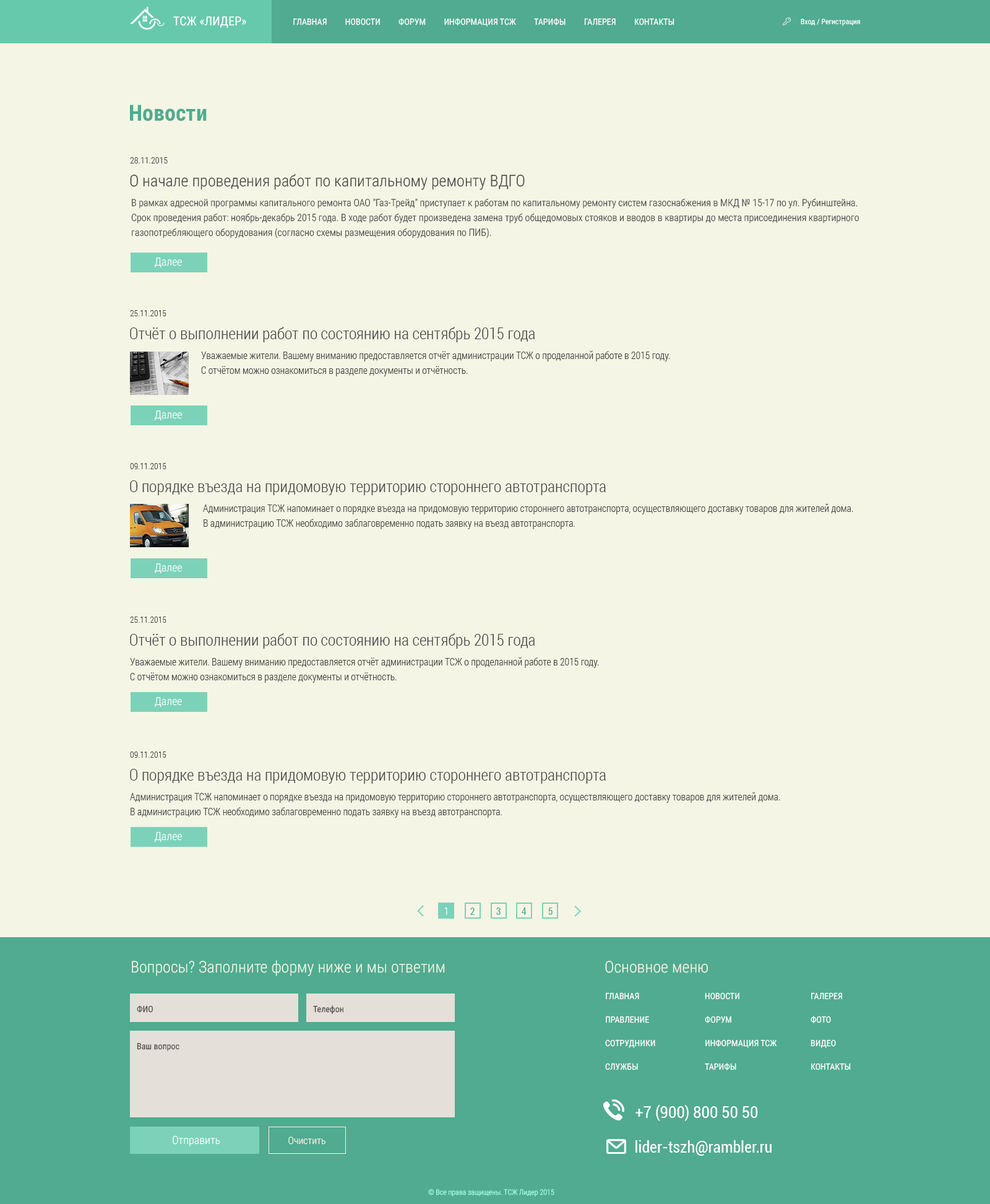
<style>
.page{position:relative;width:990px;height:1204px;background:#f5f5e5}
.page>*{position:absolute;margin:0}
.t1{font:12.4px "RobotoCondensed-Regular";letter-spacing:0.005em;color:#ffffff}
.t2{font:8.7px "RobotoCondensed-Regular";letter-spacing:0.005em;color:#ffffff}
.t3{font:7.4px "RobotoCondensed-Regular";color:#ffffff}
.t4{font:22.3px "RobotoCondensed-Bold";color:#50ab90}
.t5{font:8.7px "RobotoCondensed-Light";color:#454545}
.t6{font:16.1px "RobotoCondensed-Light";color:#454545}
.t7{font:9.9px/14.9px "RobotoCondensed-Light";color:#454545}
.t8{font:11.1px "RobotoCondensed-Light";color:#ffffff}
.t9{font:9.9px "RobotoCondensed-Light";color:#ffffff}
.t10{font:9.9px "RobotoCondensed-Regular";color:#50ab90}
.t11{font:16.1px "RobotoCondensed-Light";color:#f5f5e5}
.t12{font:8.7px/23.5px "RobotoCondensed-Regular";color:#ffffff}
.t13{font:8.7px "RobotoCondensed-Regular";color:#4c4a46}
.t14{font:16.1px "Roboto-Condensed";color:#ffffff}
.t15{font:9.9px "RobotoCondensed-Light";color:#f5f5e5}
.t16{font:7.4px "RobotoCondensed-Light";color:#a6fde3}
</style>
<div class="page">
<p class="t1" style="left:173px;top:16px;width:73px;height:12px">ТСЖ «ЛИДЕР»</p>
<p class="t2" style="left:293px;top:18px;width:382px;height:9px">ГЛАВНАЯ         НОВОСТИ         ФОРУМ         ИНФОРМАЦИЯ ТСЖ         ТАРИФЫ         ГАЛЕРЕЯ         КОНТАКТЫ</p>
<p class="t3" style="left:801px;top:19px;width:59px;height:7px">Вход / Регистрация</p>
<p class="t4" style="left:130px;top:105px;width:77px;height:16px">Новости</p>
<p class="t5" style="left:130px;top:157px;width:38px;height:7px">28.11.2015</p>
<p class="t6" style="left:130px;top:174px;width:395px;height:16px">О начале проведения работ по капитальному ремонту ВДГО</p>
<p class="t7" style="left:131px;top:198px;width:728px;height:40px">В рамках адресной программы капитального ремонта ОАО "Газ-Трейд" приступает к работам по капитальному ремонту систем газоснабжения в МКД № 15-17 по ул. Рубинштейна. Срок проведения работ: ноябрь-декабрь 2015 года. В ходе работ будет произведена замена труб общедомовых стояков и вводов в квартиры до места присоединения квартирного газопотребляющего оборудования (согласно схемы размещения оборудования по ПИБ).</p>
<p class="t8" style="left:155px;top:258px;width:27px;height:10px">Далее</p>
<p class="t5" style="left:130px;top:310px;width:37px;height:6px">25.11.2015</p>
<p class="t6" style="left:130px;top:327px;width:405px;height:15px">Отчёт о выполнении работ по состоянию на сентябрь 2015 года</p>
<p class="t7" style="left:201px;top:350px;width:469px;height:26px">Уважаемые жители. Вашему вниманию предоставляется отчёт администрации ТСЖ о проделанной работе в 2015 году.<br>С отчётом можно ознакомиться в разделе документы и отчётность.</p>
<p class="t8" style="left:155px;top:410px;width:27px;height:11px">Далее</p>
<p class="t5" style="left:130px;top:463px;width:37px;height:6px">09.11.2015</p>
<p class="t6" style="left:130px;top:480px;width:476px;height:15px">О порядке въезда на придомовую территорию стороннего автотранспорта</p>
<p class="t7" style="left:203px;top:503px;width:651px;height:26px">Администрация ТСЖ напоминает о порядке въезда на придомовую территорию стороннего автотранспорта, осуществляющего доставку товаров для жителей дома.<br>В администрацию ТСЖ необходимо заблаговременно подать заявку на въезд автотранспорта.</p>
<p class="t8" style="left:155px;top:563px;width:27px;height:11px">Далее</p>
<p class="t5" style="left:130px;top:617px;width:37px;height:6px">25.11.2015</p>
<p class="t6" style="left:130px;top:633px;width:405px;height:16px">Отчёт о выполнении работ по состоянию на сентябрь 2015 года</p>
<p class="t7" style="left:130px;top:657px;width:469px;height:26px">Уважаемые жители. Вашему вниманию предоставляется отчёт администрации ТСЖ о проделанной работе в 2015 году.<br>С отчётом можно ознакомиться в разделе документы и отчётность.</p>
<p class="t8" style="left:155px;top:697px;width:27px;height:11px">Далее</p>
<p class="t5" style="left:130px;top:751px;width:37px;height:7px">09.11.2015</p>
<p class="t6" style="left:130px;top:769px;width:476px;height:15px">О порядке въезда на придомовую территорию стороннего автотранспорта</p>
<p class="t7" style="left:130px;top:792px;width:651px;height:26px">Администрация ТСЖ напоминает о порядке въезда на придомовую территорию стороннего автотранспорта, осуществляющего доставку товаров для жителей дома.<br>В администрацию ТСЖ необходимо заблаговременно подать заявку на въезд автотранспорта.</p>
<p class="t8" style="left:155px;top:832px;width:27px;height:10px">Далее</p>
<p class="t9" style="left:444px;top:907px;width:4px;height:8px">1</p>
<p class="t10" style="left:470px;top:907px;width:5px;height:8px">2</p>
<p class="t10" style="left:496px;top:907px;width:5px;height:8px">3</p>
<p class="t10" style="left:522px;top:907px;width:5px;height:8px">4</p>
<p class="t10" style="left:548px;top:907px;width:5px;height:8px">5</p>
<p class="t11" style="left:132px;top:960px;width:313px;height:16px">Вопросы? Заполните форму ниже и мы ответим</p>
<p class="t11" style="left:605px;top:961px;width:103px;height:12px">Основное меню</p>
<p class="t12" style="left:605px;top:992px;width:51px;height:78px">ГЛАВНАЯ<br>ПРАВЛЕНИЕ<br>СОТРУДНИКИ<br>СЛУЖБЫ</p>
<p class="t12" style="left:705px;top:992px;width:72px;height:78px">НОВОСТИ<br>ФОРУМ<br>ИНФОРМАЦИЯ ТСЖ<br>ТАРИФЫ</p>
<p class="t12" style="left:811px;top:992px;width:40px;height:78px">ГАЛЕРЕЯ<br>ФОТО<br>ВИДЕО<br>КОНТАКТЫ</p>
<p class="t13" style="left:137px;top:1005px;width:16px;height:8px">ФИО</p>
<p class="t13" style="left:313px;top:1005px;width:31px;height:9px">Телефон</p>
<p class="t13" style="left:137px;top:1042px;width:43px;height:9px">Ваш вопрос</p>
<p class="t14" style="left:636px;top:1104px;width:122px;height:17px">+7 (900) 800 50 50</p>
<p class="t8" style="left:173px;top:1135px;width:47px;height:11px">Отправить</p>
<p class="t15" style="left:288px;top:1137px;width:38px;height:8px">Очистить</p>
<p class="t14" style="left:636px;top:1140px;width:136px;height:16px">lider-tszh@rambler.ru</p>
<p class="t16" style="left:428px;top:1189px;width:127px;height:8px">© Все права защищены. ТСЖ Лидер 2015</p>
</div>
